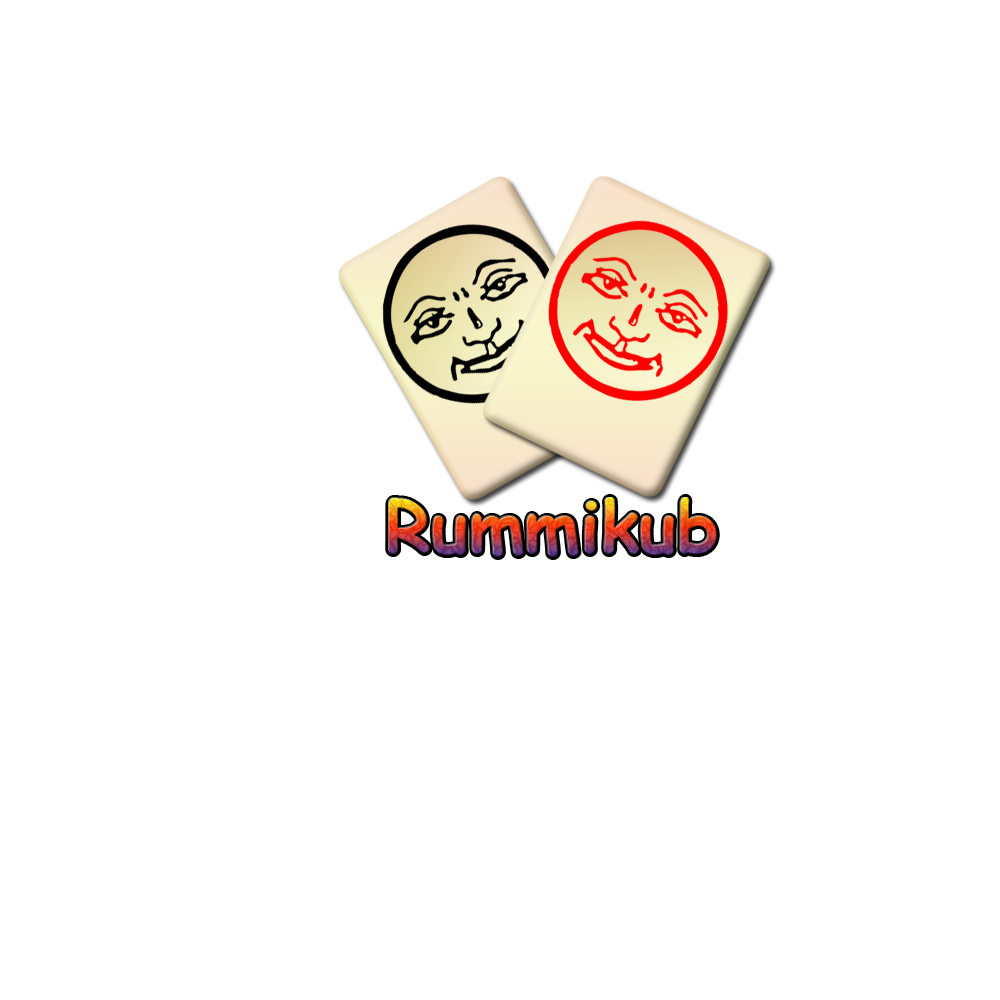
<style>
.page{position:relative;width:1000px;height:1000px;background:#ffffff}
.page>*{position:absolute;margin:0}
.t1{font:72px "ComicSansMS-Bold"}
</style>
<div class="page">
<p class="t1" style="left:388px;top:497px;width:329px;height:60px">Rummikub</p>
</div>
